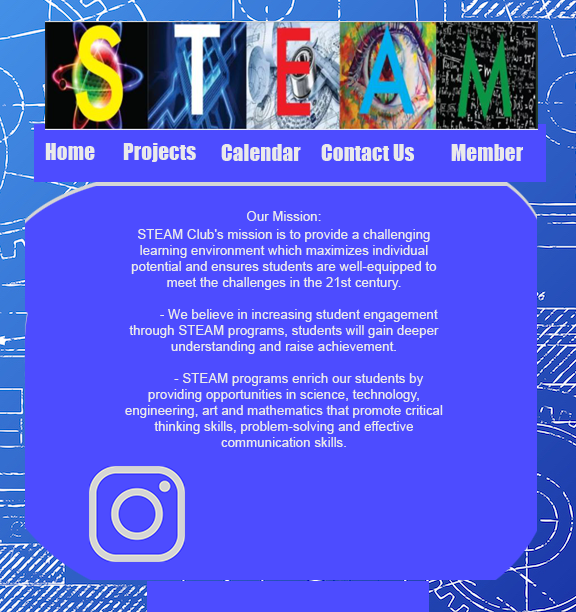
<style>
.page{position:relative;width:576px;height:612px;background:#4d4cff}
.page>*{position:absolute;margin:0}
.t1{font:21.3px "Impact";color:#eaeaea}
.t2{font:13.3px/16px "ArialMT";color:#eaeaea}
.t3{font:13.3px/2.2px "ArialMT";color:#eaeaea}
</style>
<div class="page">
<p class="t1" style="left:45px;top:143px;width:50px;height:17px">Home</p>
<p class="t1" style="left:123px;top:143px;width:73px;height:19px">Projects</p>
<p class="t1" style="left:221px;top:144px;width:80px;height:17px">Calendar</p>
<p class="t1" style="left:321px;top:144px;width:93px;height:17px">Contact Us</p>
<p class="t1" style="left:451px;top:144px;width:72px;height:17px">Member</p>
<p class="t2" style="left:125px;top:211px;width:318px;height:236px;text-align:center"><span class="t3">Our Mission:<br><br></span>STEAM Club's mission is to provide a challenging learning environment which maximizes individual potential and ensures students are well-equipped to meet the challenges in the 21st century. <br><br>        - We believe in increasing student engagement through STEAM programs, students will gain deeper understanding and raise achievement. <br><br>        - STEAM programs enrich our students by providing opportunities in science, technology, engineering, art and mathematics that promote critical thinking skills, problem-solving and effective communication skills.</p>
</div>
